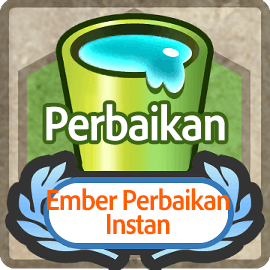
<style>
.page{position:relative;width:270px;height:270px}
.page>*{position:absolute;margin:0}
.t1{font:50px "AdobeClean-Bold";letter-spacing:-0.04em;color:#ffffff;scale:0.9 1}
.t2{font:30px/24px "AdobeClean-Bold";letter-spacing:-0.04em;color:#ff5d00;scale:0.9 1}
</style>
<div class="page">
<p class="t1" style="left:46px;top:104px;width:179px;height:37px">Perbaikan</p>
<p class="t2" style="left:47px;top:188px;width:183px;height:47px;text-align:center">Ember Perbaikan<br>Instan</p>
</div>
